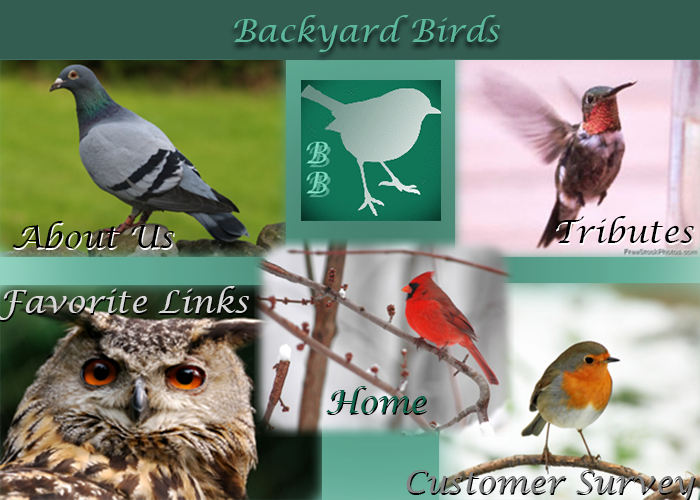
<style>
.page{position:relative;width:700px;height:500px}
.page>*{position:absolute;margin:0}
.t1{font:32px "LucidaCalligraphy-Italic";color:#5db79c}
.t2{font:32px "LucidaCalligraphy-Italic";color:#000000}
.t3{font:32px "LucidaCalligraphy-Italic";color:#d7d7d7}
.t4{font:32px "LucidaCalligraphy-Italic";color:#11634b}
</style>
<div class="page">
<p class="t1" style="left:234px;top:15px;width:266px;height:37px">Backyard Birds</p>
<p class="t2" style="left:12px;top:221px;width:162px;height:27px">About Us</p>
<p class="t2" style="left:555px;top:216px;width:139px;height:27px">Tributes</p>
<p class="t3" style="left:0px;top:286px;width:249px;height:34px">Favorite Links</p>
<p class="t4" style="left:326px;top:386px;width:100px;height:27px">Home</p>
</div>
